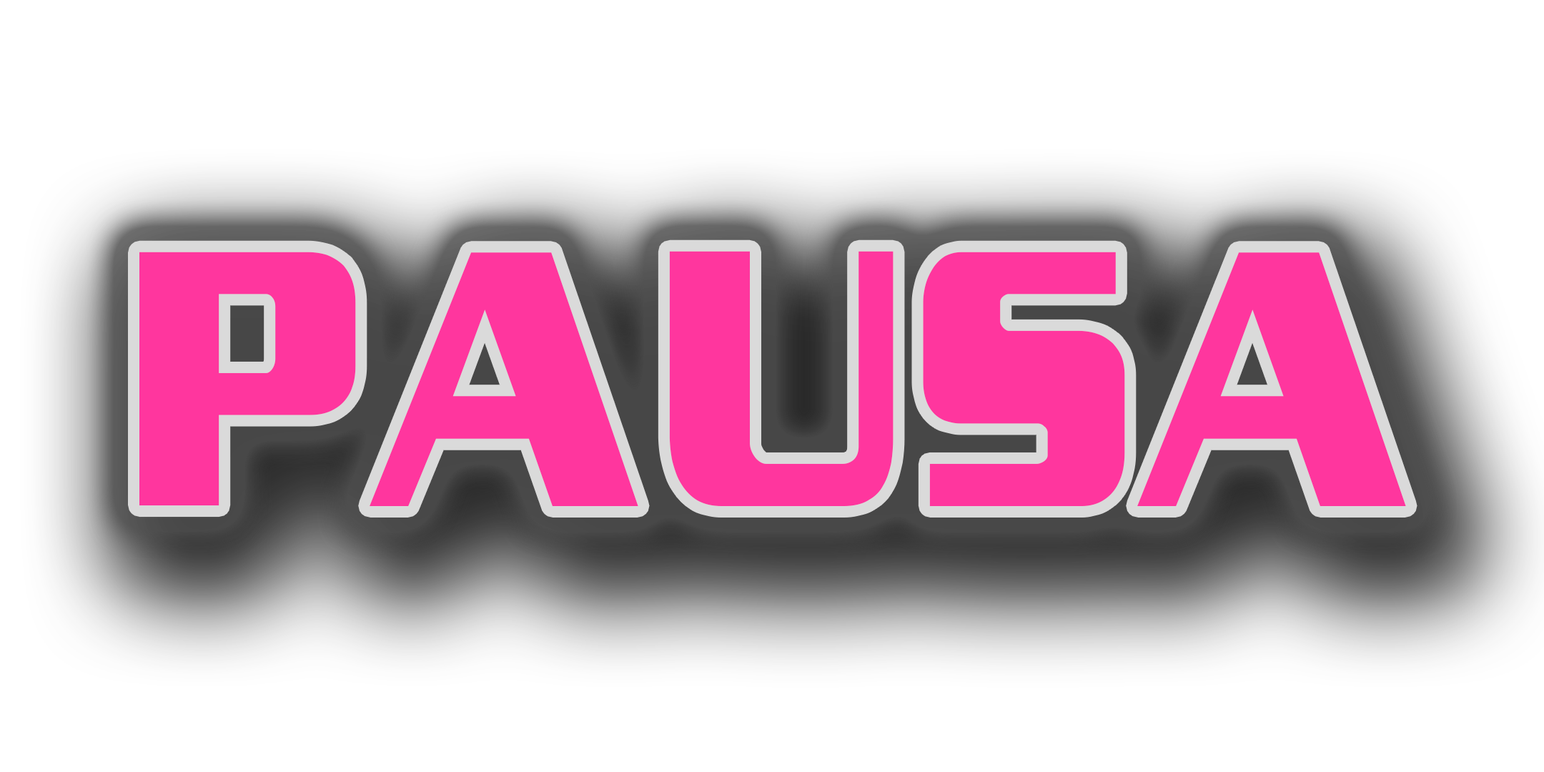
<style>
.page{position:relative;width:1544px;height:772px;background:#ffffff}
.page>*{position:absolute;margin:0}
.t1{font:363.2px "EnterSansmanBold";letter-spacing:0.01em;color:#ff369e;scale:0.9 1}
</style>
<div class="page">
<p class="t1" style="left:139px;top:251px;width:1267px;height:255px">PAUSA</p>
</div>
